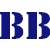
<style>
.page{position:relative;width:50px;height:50px;background:#ffffff}
.page>*{position:absolute;margin:0}
.t1{font:36px "StencilStd";color:#101580}
</style>
<div class="page">
<p class="t1" style="left:0px;top:12px;width:51px;height:27px">Bb</p>
</div>
